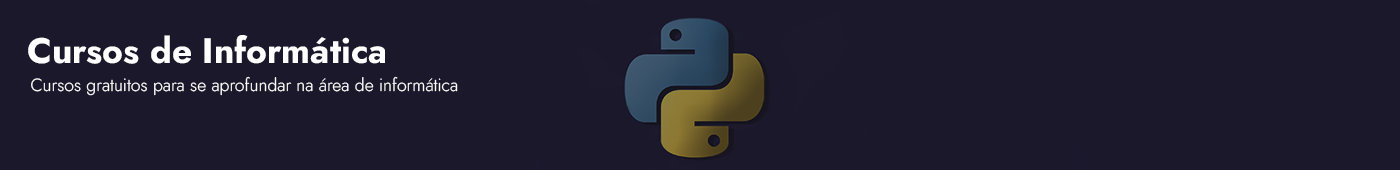
<style>
.page{position:relative;width:1400px;height:170px;background:#1b182c}
.page>*{position:absolute;margin:0}
.t1{font:35.3px "Jost-Bold";color:#ffffff}
.t2{font:17.6px "Jost-Light";color:#ffffff}
</style>
<div class="page">
<p class="t1" style="left:28px;top:35px;width:357px;height:29px">Cursos de Informática</p>
<p class="t2" style="left:31px;top:76px;width:427px;height:20px">Cursos gratuitos para se aprofundar na área de informática</p>
</div>
